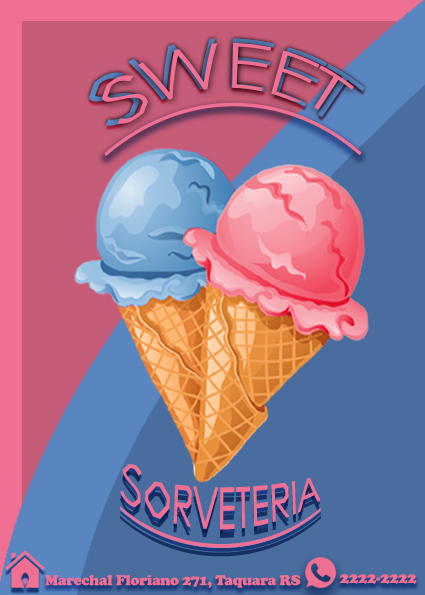
<style>
.page{position:relative;width:425px;height:595px;background:#496d9e}
.page>*{position:absolute;margin:0}
.t1{font:67.8px "CenturyGothic";letter-spacing:-0.02em}
.t2{font:67.4px "CenturyGothic";letter-spacing:-0.02em}
.t3{font:48.1px "CenturyGothic";letter-spacing:-0.005em;color:#f07093;font-variant:small-caps;text-decoration:underline}
.t4{font:48px "CenturyGothic";letter-spacing:-0.005em;color:#f07093;font-variant:small-caps;text-decoration:underline}
.t5{font:14.7px "CooperBlack";letter-spacing:-0.02em;color:#f07093}
.t6{font:15.6px "CooperBlack";letter-spacing:-0.02em;color:#f07093}
</style>
<div class="page">
<p class="t1" style="left:88px;top:38px;width:277px;height:88px;rotate:3deg">SWEET</p>
<p class="t2" style="left:89px;top:38px;width:276px;height:87px;rotate:3deg">SWEET</p>
<p class="t3" style="left:120px;top:463px;width:201px;height:86px;text-align:center">Sorveteria</p>
<p class="t4" style="left:120px;top:464px;width:201px;height:84px;text-align:center">Sorveteria</p>
<p class="t5" style="left:45px;top:575px;width:256px;height:13px">Marechal Floriano 271, Taquara RS</p>
<p class="t6" style="left:340px;top:574px;width:77px;height:10px">2222-2222</p>
</div>
